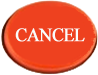
<style>
.page{position:relative;width:98px;height:75px;background:#ee411f}
.page>*{position:absolute;margin:0}
.t1{font:18.5px "TimesNewRomanPSMT";letter-spacing:-0.025em;color:#f9fcfb;font-weight:bold}
</style>
<div class="page">
<p class="t1" style="left:15px;top:28px;width:70px;height:14px">CANCEL</p>
</div>
